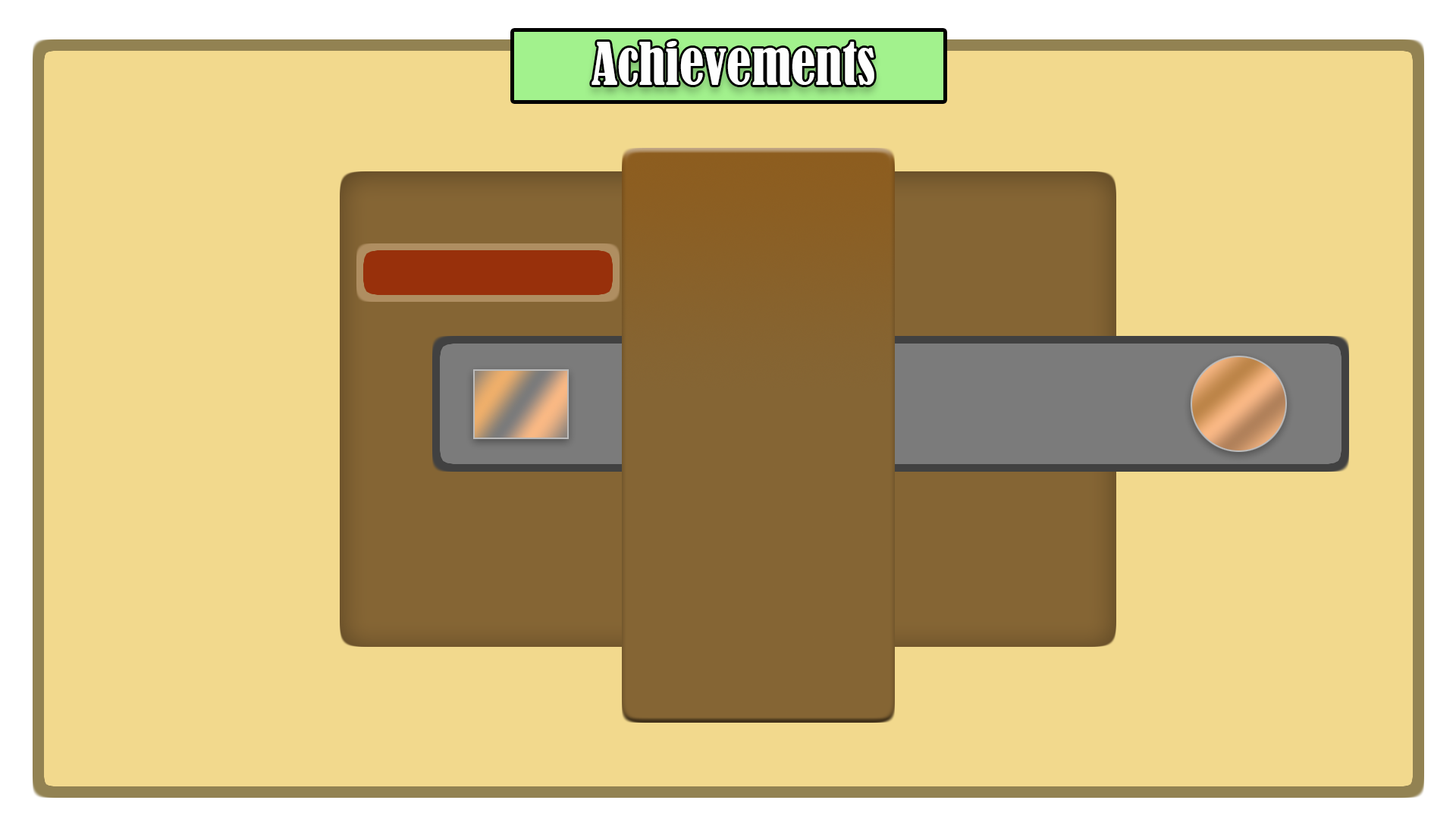
<style>
.page{position:relative;width:1456px;height:819px;background:#f2d98d}
.page>*{position:absolute;margin:0}
.t1{font:54.6px "BernardMT-Condensed";color:#fefefe}
</style>
<div class="page">
<p class="t1" style="left:591px;top:41px;width:283px;height:44px">Achievements</p>
</div>
